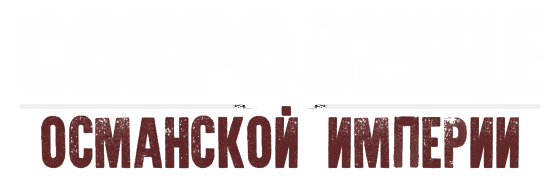
<style>
.page{position:relative;width:560px;height:186px;background:#ffffff}
.page>*{position:absolute;margin:0}
.t1{font:62.5px "WarisOverRUSBYLYAJKA";color:#5f2727}
.t2{font:62.5px "WarisOverRUSBYLYAJKA";color:#602828}
</style>
<div class="page">
<p class="t1" style="left:41px;top:106px;width:257px;height:63px">османской</p>
<p class="t2" style="left:328px;top:116px;width:191px;height:53px">империи</p>
</div>
